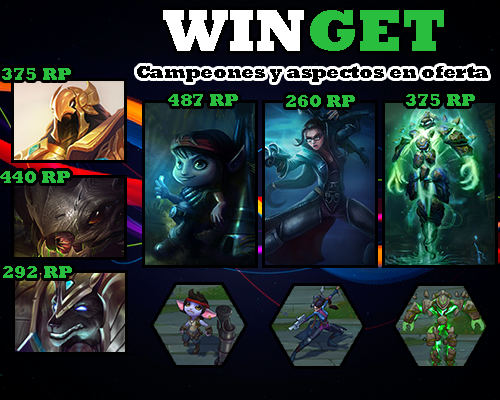
<style>
.page{position:relative;width:500px;height:400px}
.page>*{position:absolute;margin:0}
.t1{font:60px "Rockwell-ExtraBold";color:#ffffff}
.t2{font:60px "Rockwell-ExtraBold";color:#29be3e}
.t3{font:18px "Rockwell-ExtraBold";color:#29be3e}
.t4{font:18px "Rockwell-ExtraBold";color:#000000}
</style>
<div class="page">
<p class="t1" style="left:163px;top:10px;width:281px;height:41px">WIN<span class="t2">GET</span></p>
<p class="t3" style="left:2px;top:68px;width:69px;height:12px">375 RP</p>
<p class="t4" style="left:137px;top:66px;width:351px;height:16px">Campeones y aspectos en oferta</p>
<p class="t3" style="left:168px;top:94px;width:70px;height:12px">487 RP</p>
<p class="t3" style="left:286px;top:95px;width:69px;height:12px">260 RP</p>
<p class="t3" style="left:406px;top:94px;width:69px;height:12px">375 RP</p>
<p class="t3" style="left:0px;top:171px;width:70px;height:12px">440 RP</p>
<p class="t3" style="left:3px;top:266px;width:69px;height:12px">292 RP</p>
</div>
